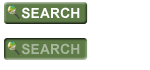
<style>
.page{position:relative;width:150px;height:70px;background:#ffffff}
.page>*{position:absolute;margin:0}
.t1{font:14px "Arial-BoldMT";color:#ffffff;text-transform:uppercase}
.t2{font:14px "Arial-BoldMT";color:#a7b79b;text-transform:uppercase}
</style>
<div class="page">
<p class="t1" style="left:21px;top:7px;width:59px;height:12px">Search</p>
<p class="t2" style="left:21px;top:43px;width:59px;height:12px">Search</p>
</div>
